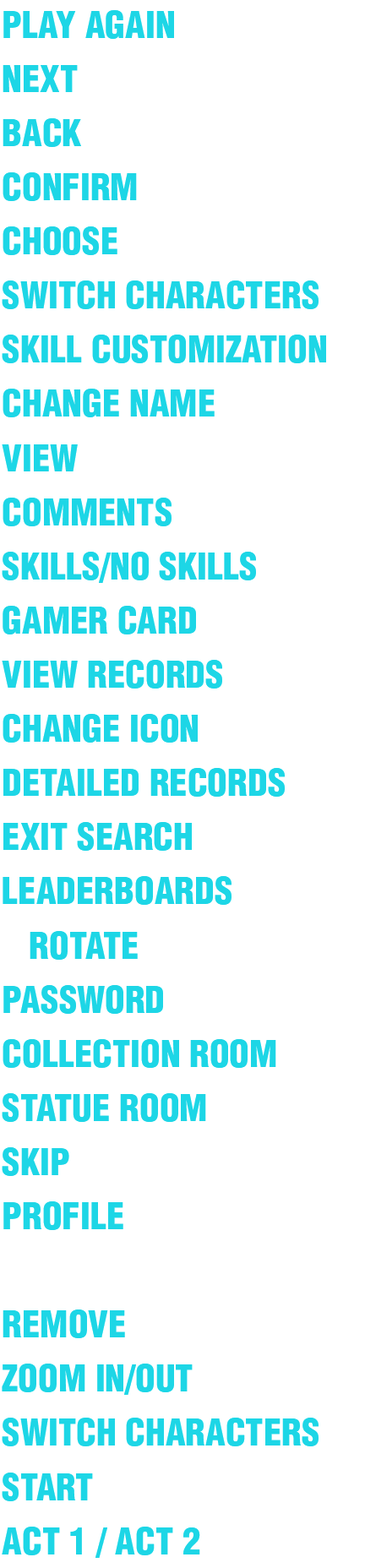
<style>
.page{position:relative;width:365px;height:1568px;background:#ffffff}
.page>*{position:absolute;margin:0}
.t1{font:36px/54.2px "Helvetica-Condensed-Black";color:#1dd6e6}
</style>
<div class="page">
<p class="t1" style="left:2px;top:10px;width:324px;height:1548px">PLAY AGAIN<br>NEXT<br>BACK<br>CONFIRM<br>CHOOSE<br>SWITCH CHARACTERS<br>SKILL CUSTOMIZATION<br>CHANGE NAME<br>VIEW<br>COMMENTS<br>SKILLS/NO SKILLS<br>GAMER CARD<br>VIEW RECORDS<br>CHANGE ICON<br>DETAILED RECORDS<br>EXIT SEARCH<br>LEADERBOARDS<br>   ROTATE<br>PASSWORD<br>COLLECTION ROOM<br>STATUE ROOM<br>SKIP<br>PROFILE<br><br>REMOVE<br>ZOOM IN/OUT<br>SWITCH CHARACTERS<br>START<br>ACT 1 / ACT 2</p>
</div>
